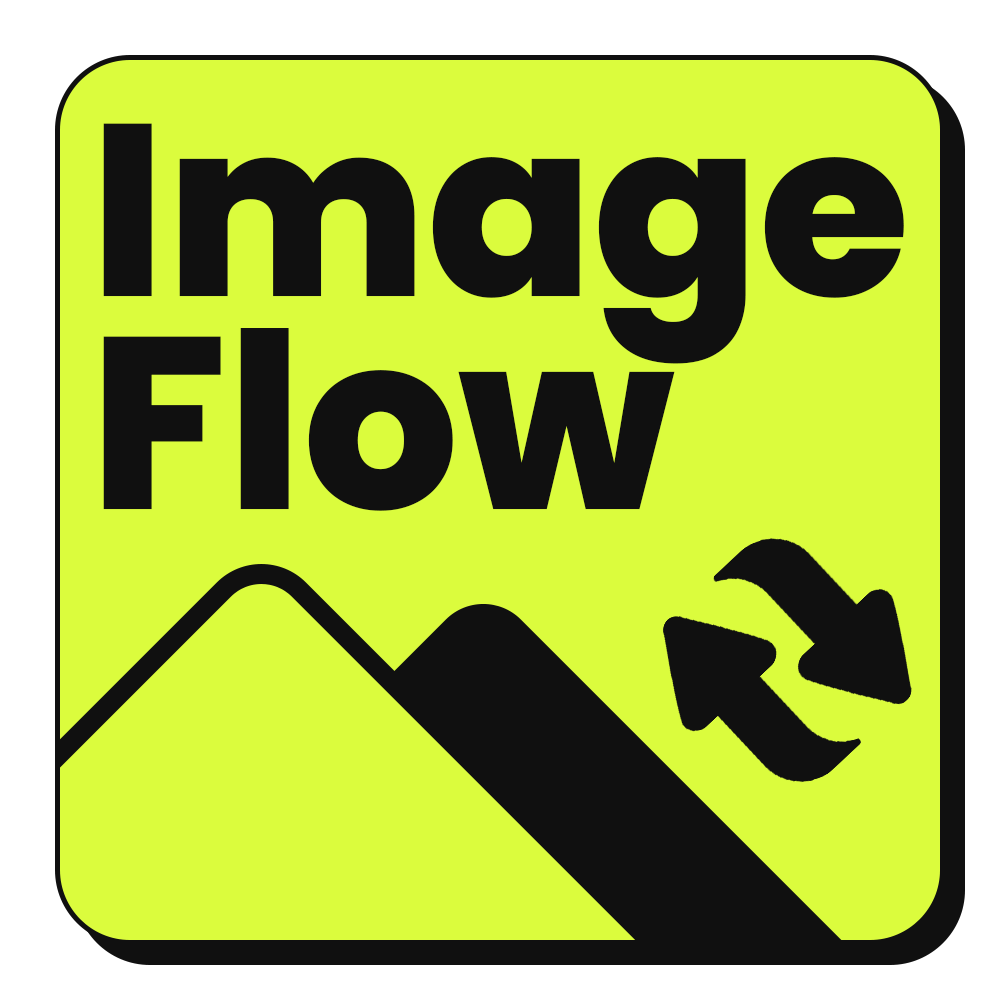
<style>
.page{position:relative;width:1000px;height:1000px;background:#dbfc3d}
.page>*{position:absolute;margin:0}
.t1{font:244.5px/213px "Poppins-ExtraBold";color:#101010}
</style>
<div class="page">
<p class="t1" style="left:103px;top:123px;width:801px;height:388px;text-align:right">Image<br>Flow</p>
</div>
